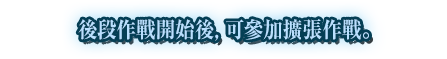
<style>
.page{position:relative;width:447px;height:59px;background:#ffffff}
.page>*{position:absolute;margin:0}
.t1{font:22px "RyuminPro-ExBold";color:#b9e0ff;scale:0.9 1}
</style>
<div class="page">
<p class="t1" style="left:78px;top:19px;width:291px;height:22px">後段作戰開始後，可參加擴張作戰。</p>
</div>
